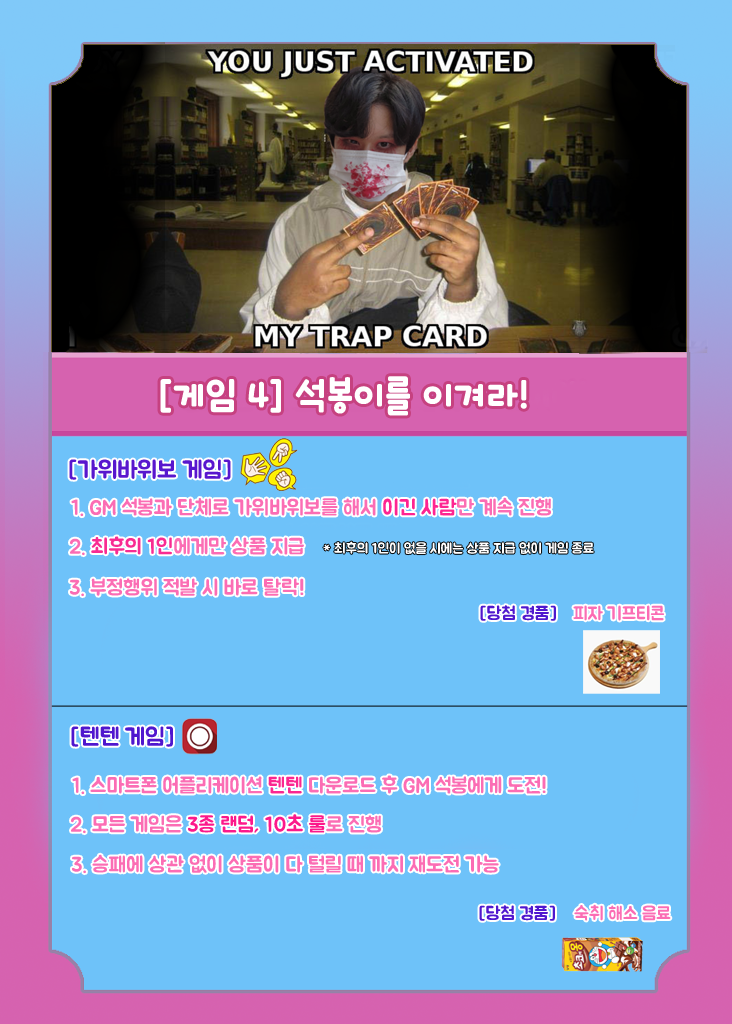
<style>
.page{position:relative;width:732px;height:1024px;background:#6ec2f9}
.page>*{position:absolute;margin:0}
.t1{font:40px "icTTHayanbunpilB";color:#ffffff}
.t2{font:24px "Pix_BMJUAOTF";color:#5817ce}
.t3{font:21px "Pix_BMJUAOTF";color:#fb6db4}
.t4{font:21px "Pix_BMJUAOTF";color:#fe2491}
.t5{font:21px "Pix_BMJUAOTF";color:#f82b92}
.t6{font:14px "Pix_BMJUAOTF";color:#ffffff}
.t7{font:18px "Pix_BMJUAOTF";color:#4f17ce}
.t8{font:18px "Pix_BMJUAOTF";color:#fb6db4}
.t9{font:24px "Pix_BMJUAOTF";color:#4f17ce}
.t10{font:21px "Pix_BMJUAOTF";color:#fa2791}
.t11{font:21px "Pix_BMJUAOTF";color:#fc198b}
</style>
<div class="page">
<p class="t1" style="left:160px;top:376px;width:367px;height:40px">[게임 4] 석봉이를 이겨라!</p>
<p class="t2" style="left:69px;top:459px;width:162px;height:21px">[가위바위보 게임]</p>
<p class="t3" style="left:71px;top:497px;width:480px;height:20px">1. GM 석봉과 단체로 가위바위보를 해서 <span class="t4">이긴 사람</span>만 계속 진행</p>
<p class="t3" style="left:70px;top:536px;width:234px;height:20px">2. <span class="t5">최후의 1인</span>에게만 상품 지급</p>
<p class="t6" style="left:323px;top:541px;width:271px;height:14px">* 최후의 1인이 없을 시에는 상품 지급 없이 게임 종료</p>
<p class="t3" style="left:70px;top:578px;width:234px;height:19px">3. 부정행위 적발 시 바로 탈락!</p>
<p class="t7" style="left:480px;top:605px;width:76px;height:16px">[당첨 경품]</p>
<p class="t8" style="left:573px;top:605px;width:91px;height:16px">피자 기프티콘</p>
<p class="t9" style="left:71px;top:726px;width:102px;height:21px">[텐텐 게임]</p>
<p class="t3" style="left:72px;top:775px;width:474px;height:20px">1. 스마트폰 어플리케이션 <span class="t10">텐텐</span> 다운로드 후 GM 석봉에게 도전!</p>
<p class="t11" style="left:71px;top:814px;width:310px;height:20px"><span class="t3">2. 모든 게임은 </span>3종 랜덤, 10초 룰<span class="t3">로 진행</span></p>
<p class="t3" style="left:72px;top:854px;width:427px;height:20px">3. 승패에 상관 없이 상품이 다 털릴 때 까지 재도전 가능</p>
<p class="t7" style="left:479px;top:905px;width:76px;height:16px">[당첨 경품]</p>
<p class="t8" style="left:574px;top:904px;width:97px;height:17px">숙취 해소 음료</p>
</div>
